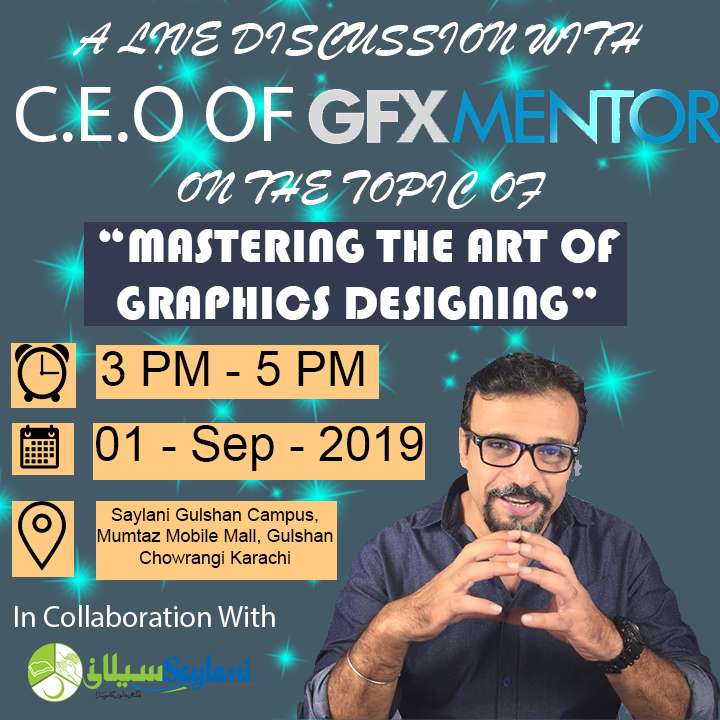
<style>
.page{position:relative;width:720px;height:720px;background:#445a67}
.page>*{position:absolute;margin:0}
.t1{font:48px "BrushScriptMT";color:#fefefe}
.t2{font:80px "MyriadPro-Regular";color:#fefefe}
.t3{font:48px "Bauhaus93";color:#fefefe}
.t4{font:48px "ArialMT";color:#000000}
.t5{font:18px "ArialMT";color:#000000}
</style>
<div class="page">
<p class="t1" style="left:73px;top:21px;width:570px;height:39px">A LIVE DISCUSSION WITH</p>
<p class="t2" style="left:16px;top:86px;width:277px;height:56px">C.E.O OF</p>
<p class="t1" style="left:177px;top:170px;width:369px;height:39px">ON THE TOPIC OF</p>
<p class="t3" style="left:99px;top:228px;width:522px;height:92px;text-align:center">“MASTERING THE ART OF GRAPHICS DESIGNING”</p>
<p class="t4" style="left:102px;top:351px;width:262px;height:35px">3 PM - 5 PM</p>
<p class="t4" style="left:96px;top:425px;width:327px;height:46px">01 - Sep - 2019</p>
<p class="t5" style="left:97px;top:508px;width:236px;height:60px;text-align:center">Saylani Gulshan Campus, Mumtaz Mobile Mall, Gulshan Chowrangi Karachi</p>
</div>
